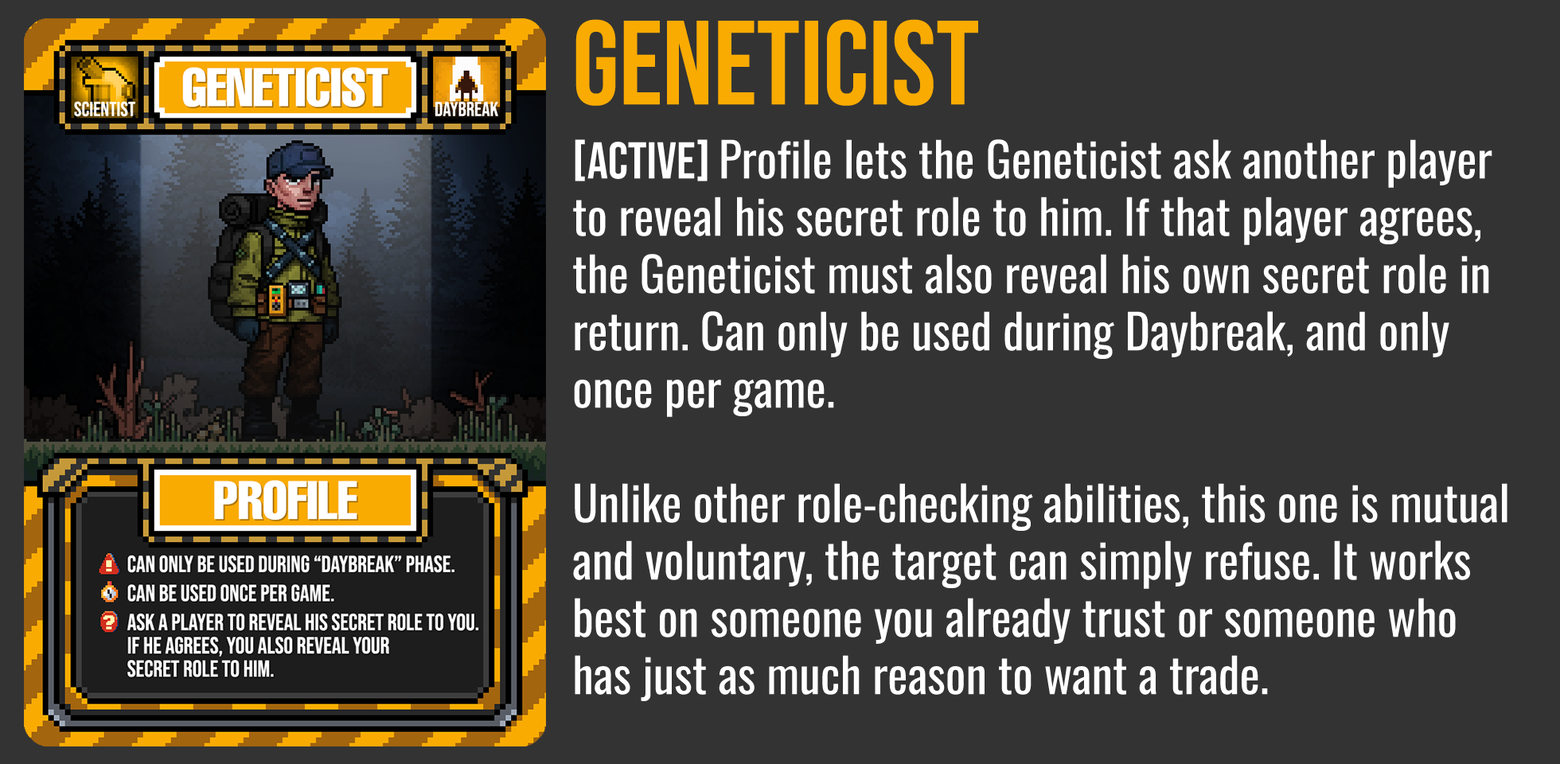
<style>
.page{position:relative;width:1560px;height:764px;background:#333333}
.page>*{position:absolute;margin:0}
.t1{font:119.4px "BebasNeue-Regular";color:#f9ab02}
.t2{font:47.8px "Oswald-Regular";color:#ffffff}
.t3{font:51.7px "BebasNeue-Regular";color:#ffffff}
</style>
<div class="page">
<p class="t1" style="left:576px;top:19px;width:402px;height:87px">GENETICIST</p>
<p class="t2" style="left:573px;top:139px;width:935px;height:562px"><span class="t3">[ACTIVE] </span>Profile lets the Geneticist ask another player to reveal his secret role to him. If that player agrees, the Geneticist must also reveal his own secret role in return. Can only be used during Daybreak, and only once per game.<br><br>Unlike other role-checking abilities, this one is mutual and voluntary, the target can simply refuse. It works best on someone you already trust or someone who has just as much reason to want a trade.</p>
</div>
